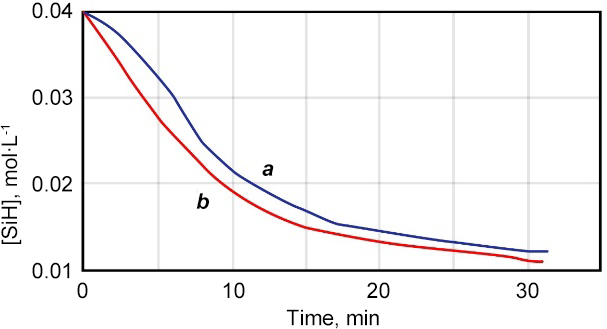
<style>
.page{position:relative;width:607px;height:329px;background:#ffffff}
.page>*{position:absolute;margin:0}
.t1{font:21.4px "ArialMT";color:#000000}
.t2{font:21.4px "Arial-BoldItalicMT";color:#000000}
</style>
<div class="page">
<p class="t1" style="left:32px;top:2px;width:41px;height:277px;text-align:right">0.04<br>0.03<br>0.02<br>0.01</p>
<p class="t1" style="left:0px;top:126px;width:22px;height:118px;rotate:-90deg">[SiH], mol∙L-1</p>
<p class="t2" style="left:262px;top:164px;width:12px;height:12px">a</p>
<p class="t2" style="left:196px;top:193px;width:13px;height:16px">b</p>
<p class="t1" style="left:77px;top:282px;width:11px;height:17px">0</p>
<p class="t1" style="left:223px;top:282px;width:22px;height:17px">10</p>
<p class="t1" style="left:367px;top:282px;width:23px;height:17px">20</p>
<p class="t1" style="left:516px;top:282px;width:23px;height:17px">30</p>
<p class="t1" style="left:286px;top:309px;width:93px;height:20px">Time, min</p>
</div>
